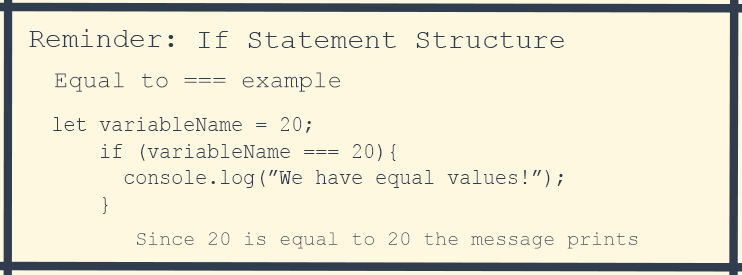
<style>
.page{position:relative;width:742px;height:275px;background:#fff8e1}
.page>*{position:absolute;margin:0}
.t1{font:28px "CourierNewPSMT";color:#303d4e}
.t2{font:24px "CourierNewPSMT";color:#303d4e}
.t3{font:22px "CourierNewPSMT";color:#303d4e;scale:0.91 1}
.t4{font:24px "CourierNewPS-BoldItalicMT";color:#303d4e;scale:0.91 1}
.t5{font:20px "CourierNewPSMT";color:#303d4e}
</style>
<div class="page">
<p class="t1" style="left:29px;top:29px;width:145px;height:18px">Reminder:</p>
<p class="t1" style="left:199px;top:31px;width:365px;height:17px">If Statement Structure</p>
<p class="t2" style="left:55px;top:72px;width:285px;height:20px">Equal to === example</p>
<p class="t3" style="left:53px;top:117px;width:510px;height:97px"><span class="t4">  <br><br> </span>let variableName = 20;<br>     if (variableName === 20){<br>       console.log(”We have equal values!”);<br>     }</p>
<p class="t5" style="left:137px;top:232px;width:501px;height:17px">Since 20 is equal to 20 the message prints</p>
</div>
